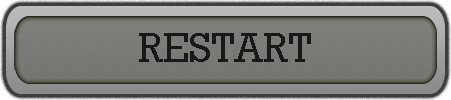
<style>
.page{position:relative;width:451px;height:100px}
.page>*{position:absolute;margin:0}
.t1{font:41.7px "Rockwell";color:#171717}
</style>
<div class="page">
<p class="t1" style="left:139px;top:33px;width:172px;height:29px">RESTART</p>
</div>
